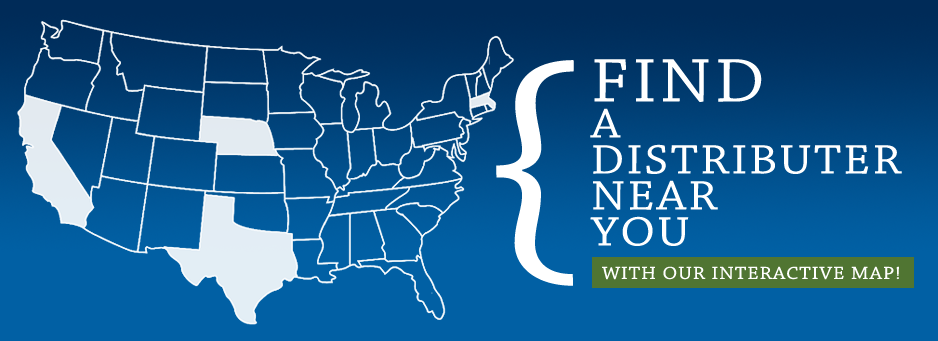
<style>
.page{position:relative;width:938px;height:341px;background:#0160a4}
.page>*{position:absolute;margin:0}
.t1{font:266.8px "ChaparralPro-Regular";letter-spacing:0.05em;color:#ffffff;text-transform:uppercase;scale:1.11 1}
.t2{font:43.2px/36px "ChaparralPro-Regular";letter-spacing:0.05em;color:#ffffff;text-transform:uppercase;scale:1.11 1}
.t3{font:64.8px/36px "ChaparralPro-Regular";letter-spacing:0.05em;color:#ffffff;text-transform:uppercase;scale:1.11 1}
.t4{font:18.3px "ChaparralPro-Regular";letter-spacing:0.05em;color:#ffffff;text-transform:uppercase;scale:1.11 1}
</style>
<div class="page">
<p class="t1" style="left:496px;top:60px;width:78px;height:226px">{</p>
<p class="t2" style="left:590px;top:59px;width:312px;height:187px"><span class="t3">FIND<br></span>a distributer<br>near <br>you</p>
<p class="t4" style="left:602px;top:266px;width:297px;height:14px">with our interactive map!</p>
</div>
